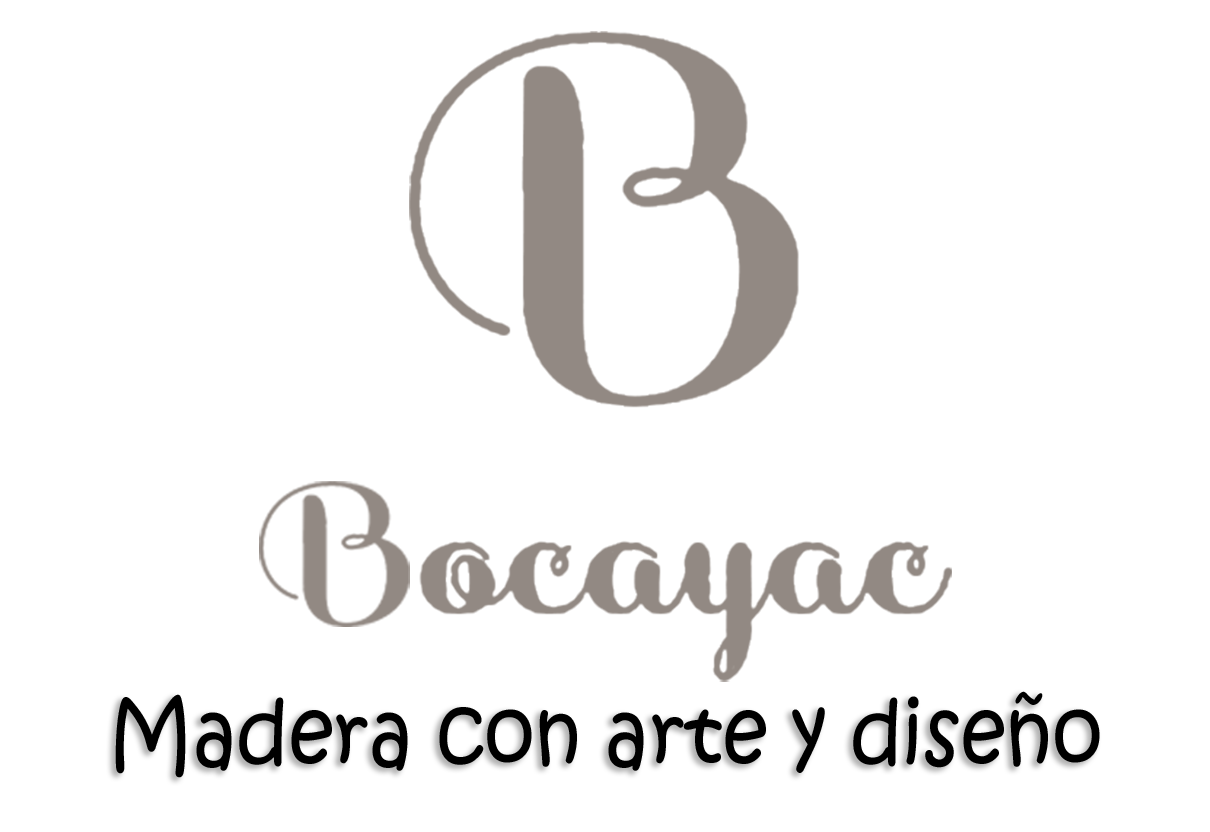
<style>
.page{position:relative;width:1210px;height:832px;background:#ffffff}
.page>*{position:absolute;margin:0}
.t1{font:86.6px "KristenITC-Regular";color:#000000;scale:0.92 1}
</style>
<div class="page">
<p class="t1" style="left:115px;top:691px;width:985px;height:87px">Madera con arte y diseño</p>
</div>
